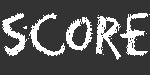
<style>
.page{position:relative;width:150px;height:75px;background:#333333}
.page>*{position:absolute;margin:0}
.t1{font:53.9px "Eraser-Regular";color:#ffffff;scale:0.84 1}
</style>
<div class="page">
<p class="t1" style="left:2px;top:13px;width:148px;height:47px">score</p>
</div>
